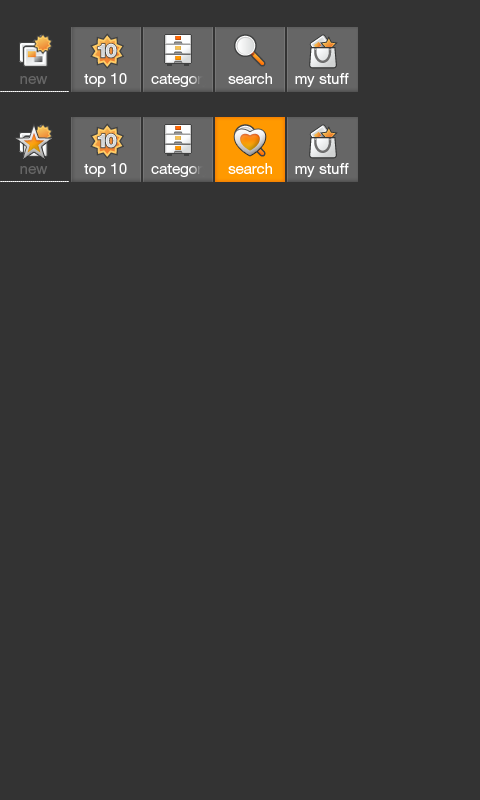
<style>
.page{position:relative;width:480px;height:800px;background:#333333}
.page>*{position:absolute;margin:0}
.t1{font:15px "HelveticaNeueCE-Roman";color:#666666}
.t2{font:15px "HelveticaNeueCE-Roman";color:#ffffff}
</style>
<div class="page">
<p class="t1" style="left:20px;top:76px;width:28px;height:8px">new</p>
<p class="t2" style="left:84px;top:73px;width:43px;height:14px">top 10</p>
<p class="t2" style="left:228px;top:73px;width:44px;height:11px">search</p>
<p class="t2" style="left:295px;top:73px;width:54px;height:14px">my stuff</p>
<p class="t1" style="left:20px;top:166px;width:28px;height:8px">new</p>
<p class="t2" style="left:84px;top:163px;width:43px;height:14px">top 10</p>
<p class="t2" style="left:228px;top:163px;width:44px;height:11px">search</p>
<p class="t2" style="left:295px;top:163px;width:54px;height:14px">my stuff</p>
</div>
